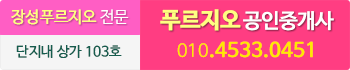
<style>
.page{position:relative;width:350px;height:70px;background:#ff3d82}
.page>*{position:absolute;margin:0}
.t1{font:16px "NanumBarunGothicOTF";color:#ffff80}
.t2{font:16px "NanumBarunGothicOTFLight";color:#ffffff}
.t3{font:20.2px "NanumBarunGothicOTF";letter-spacing:-0.025em;color:#ffffff;font-weight:bold}
.t4{font:22.5px "NanumBarunGothicOTFBold";letter-spacing:-0.025em;color:#ffff81;font-weight:bold}
.t5{font:19.5px "NanumBarunGothicOTF";color:#ffe900;font-weight:bold}
.t6{font:17.4px "NanumBarunGothicOTFUltraLight";color:#ffe900;font-weight:bold}
.t7{font:14px "NanumBarunGothicOTF";color:#165d4e}
</style>
<div class="page">
<p class="t1" style="left:11px;top:9px;width:118px;height:16px">장성푸르지오<span class="t2"> 전문</span></p>
<p class="t3" style="left:160px;top:9px;width:174px;height:22px"><span class="t4">푸르지오 </span>공인중개사</p>
<p class="t5" style="left:177px;top:41px;width:136px;height:17px"><span class="t6">010</span>.4533.0451</p>
<p class="t7" style="left:16px;top:45px;width:106px;height:13px">단지내 상가 103호</p>
</div>
